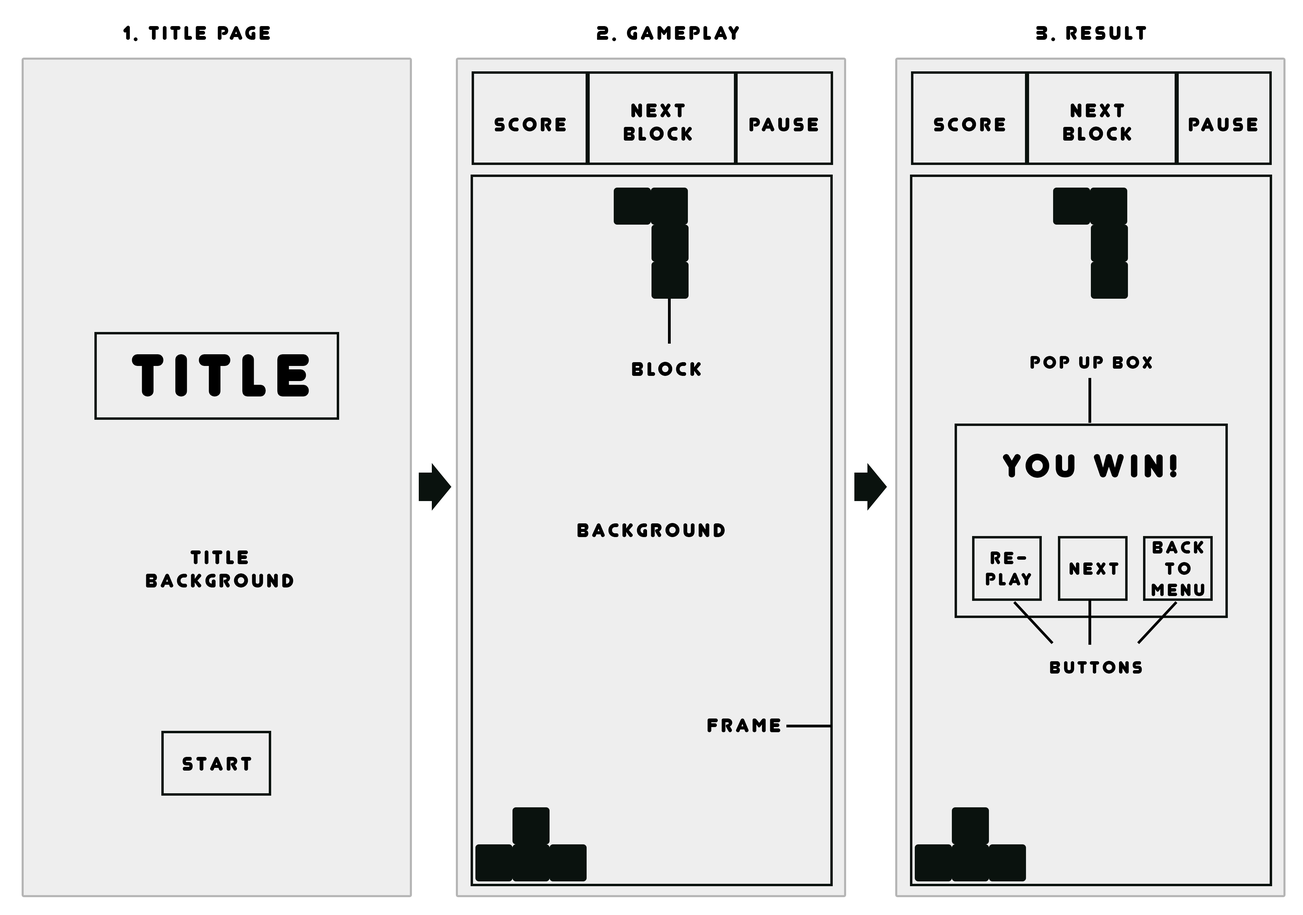
<style>
.page{position:relative;width:1303px;height:915px;background:#eeeeee}
.page>*{position:absolute;margin:0}
.t1{font:22.9px "Junegull";letter-spacing:0.12em;color:#000000}
.t2{font:22.9px/23.4px "Junegull";letter-spacing:0.12em;color:#000000}
.t3{font:70.5px "Junegull";letter-spacing:0.12em;color:#000000}
.t4{font:20.9px "Junegull";letter-spacing:0.12em;color:#000000}
.t5{font:38.7px "Junegull";letter-spacing:0.12em;color:#000000}
.t6{font:20.9px/21.3px "Junegull";letter-spacing:0.12em;color:#000000}
</style>
<div class="page">
<p class="t1" style="left:123px;top:26px;width:147px;height:15px">1. title page</p>
<p class="t1" style="left:597px;top:26px;width:142px;height:15px">2. Gameplay</p>
<p class="t1" style="left:1036px;top:26px;width:110px;height:15px">3. Result</p>
<p class="t2" style="left:623px;top:104px;width:69px;height:37px;text-align:center">Next<br>block</p>
<p class="t2" style="left:1063px;top:104px;width:68px;height:37px;text-align:center">Next<br>block</p>
<p class="t1" style="left:494px;top:117px;width:72px;height:14px">Score</p>
<p class="t1" style="left:749px;top:118px;width:69px;height:13px">Pause</p>
<p class="t1" style="left:933px;top:117px;width:72px;height:14px">Score</p>
<p class="t1" style="left:1188px;top:118px;width:69px;height:13px">Pause</p>
<p class="t3" style="left:132px;top:354px;width:177px;height:43px">Title</p>
<p class="t1" style="left:632px;top:362px;width:69px;height:14px">Block</p>
<p class="t4" style="left:1030px;top:356px;width:122px;height:13px">Pop up box</p>
<p class="t5" style="left:1002px;top:454px;width:174px;height:24px">You win!</p>
<p class="t1" style="left:577px;top:523px;width:148px;height:14px">Background</p>
<p class="t6" style="left:1151px;top:541px;width:53px;height:55px;text-align:center">Back<br>to<br>Menu</p>
<p class="t2" style="left:146px;top:551px;width:147px;height:37px;text-align:center">Title<br>background</p>
<p class="t6" style="left:985px;top:552px;width:46px;height:34px;text-align:center">Re-<br>play</p>
<p class="t4" style="left:1069px;top:563px;width:49px;height:12px">Next</p>
<p class="t4" style="left:1050px;top:661px;width:92px;height:13px">Buttons</p>
<p class="t1" style="left:707px;top:719px;width:73px;height:14px">Frame</p>
<p class="t1" style="left:182px;top:757px;width:69px;height:14px">Start</p>
</div>
